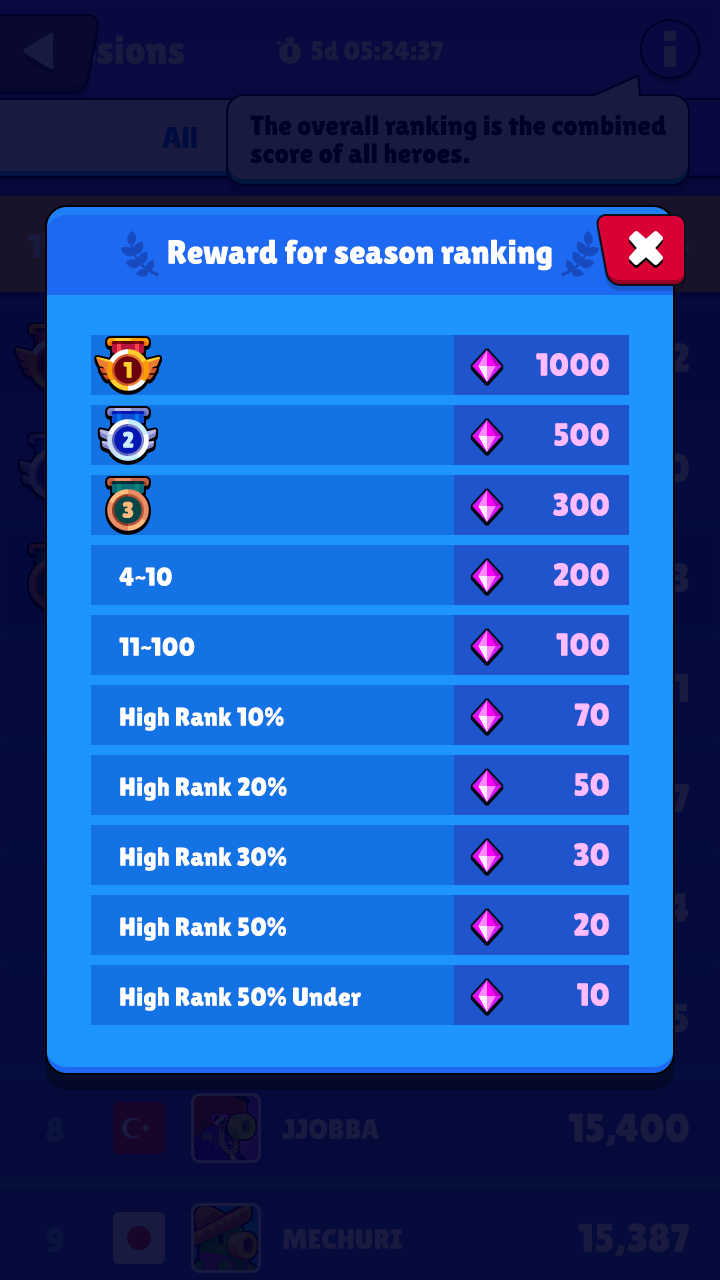
<style>
.page{position:relative;width:720px;height:1280px;background:#1372e4}
.page>*{position:absolute;margin:0}
.t1{font:34px "LilitaOne";color:#ffffff}
.t2{font:32px/70px "LilitaOne";color:#ffbbff}
.t3{font:26px/70px "LilitaOne";color:#ffffff}
</style>
<div class="page">
<p class="t1" style="left:168px;top:239px;width:384px;height:32px">Reward for season ranking</p>
<p class="t2" style="left:536px;top:353px;width:73px;height:653px;text-align:right">1000<br>500<br>300<br>200<br>100<br>70<br>50<br>30<br>20<br>10</p>
<p class="t3" style="left:119px;top:567px;width:242px;height:444px">4~10<br>11~100<br>High Rank 10%<br>High Rank 20%<br>High Rank 30%<br>High Rank 50%<br>High Rank 50% Under</p>
</div>
